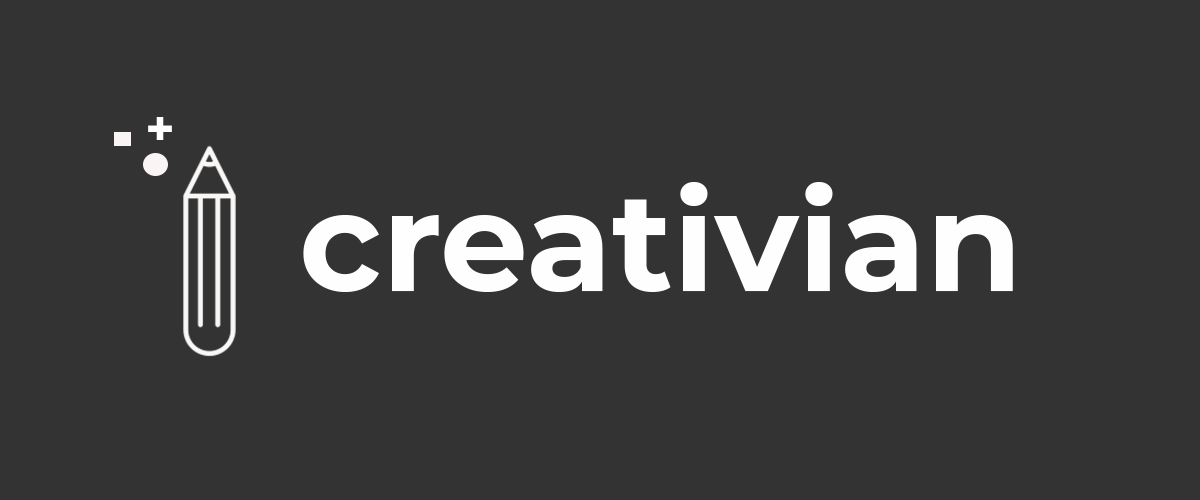
<style>
.page{position:relative;width:1200px;height:500px;background:#333333}
.page>*{position:absolute;margin:0}
.t1{font:50px "Montserrat-Bold";color:#fefefe}
.t2{font:139.4px "Montserrat-Bold";color:#fefefe}
</style>
<div class="page">
<p class="t1" style="left:148px;top:117px;width:24px;height:23px">+</p>
<p class="t2" style="left:303px;top:182px;width:710px;height:110px">creativian</p>
</div>
